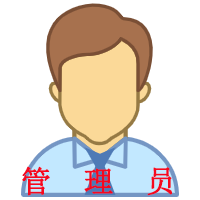
<style>
.page{position:relative;width:200px;height:200px;background:#ffffff}
.page>*{position:absolute;margin:0}
.t1{font:30px "SimSun";color:#f6081e;font-weight:bold}
</style>
<div class="page">
<p class="t1" style="left:22px;top:166px;width:151px;height:30px">管  理  员</p>
</div>
